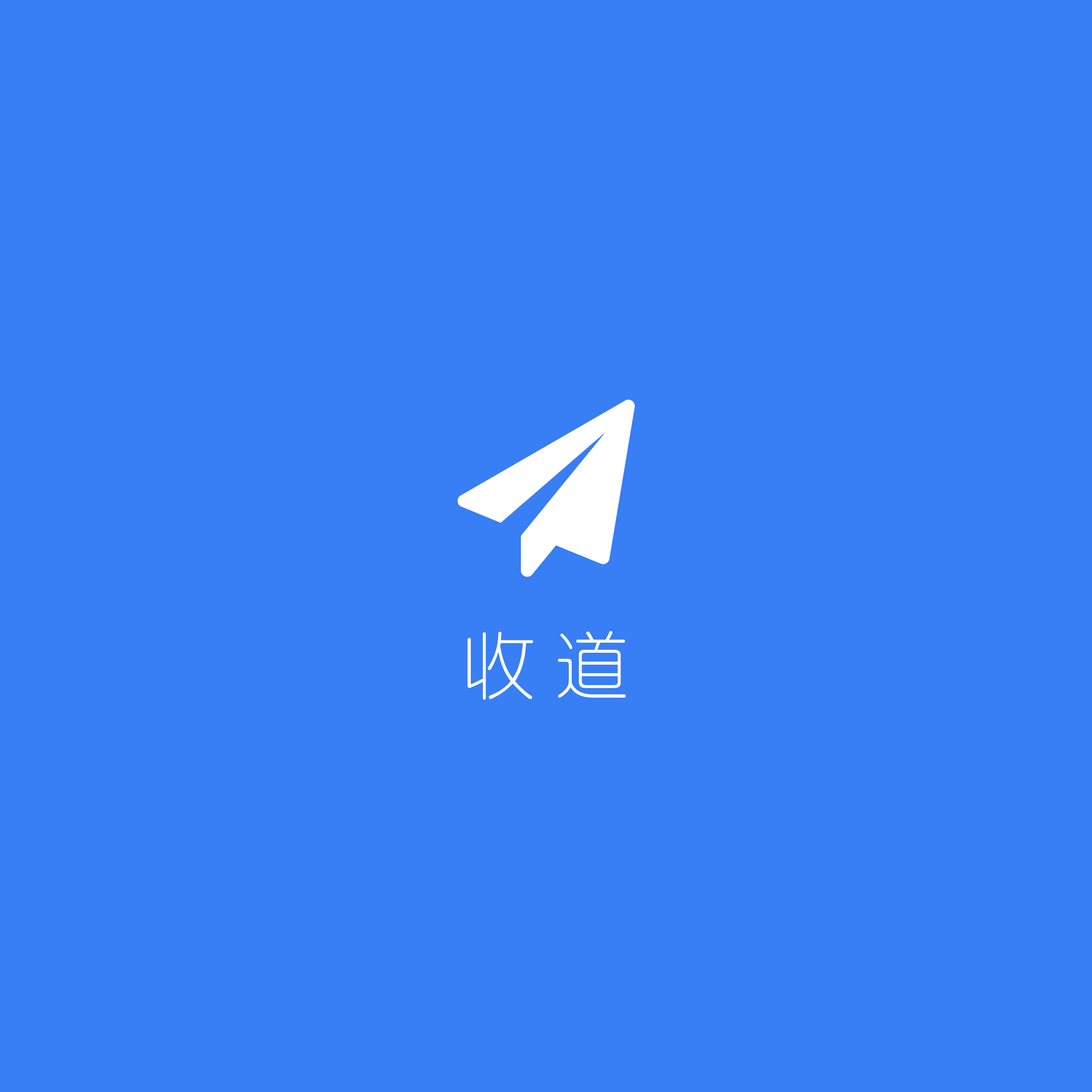
<style>
.page{position:relative;width:1092px;height:1092px;background:#387ef5}
.page>*{position:absolute;margin:0}
.t1{font:72.1px "FZY1JW--GB1-0";color:#ffffff;font-variant:small-caps}
</style>
<div class="page">
<p class="t1" style="left:467px;top:631px;width:159px;height:69px">收 道</p>
</div>
